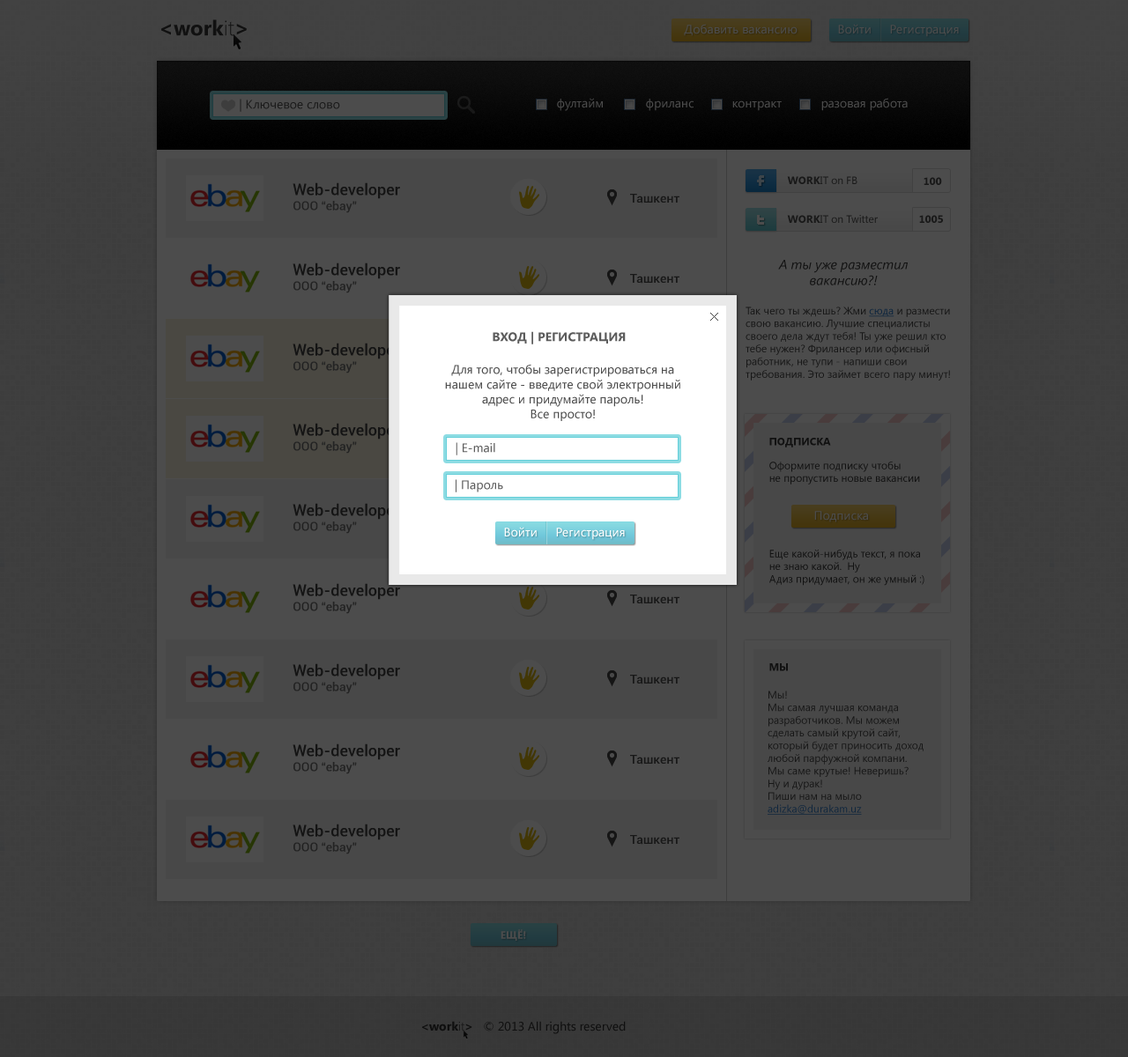
<style>
.page{position:relative;width:1128px;height:1057px}
.page>*{position:absolute;margin:0}
.t1{font:21.1px "SegoeUI-Bold";color:#111111}
.t2{font:21.1px "SegoeUI-Light";color:#111111}
.t3{font:12.3px "SegoeUI";color:#4c4c4c}
.t4{font:12.3px "SegoeUI";color:#1b1b1b}
.t5{font:12.3px "SegoeUI";color:#4b4b4b}
.t6{font:15.9px "Roboto-Medium";color:#141414}
.t7{font:12.3px "Roboto-Medium";color:#141414}
.t8{font:10.6px "SegoeUI";color:#191919}
.t9{font:10.6px "SegoeUI-Bold";color:#191919}
.t10{font:12.3px "Roboto-Medium";color:#181818}
.t11{font:13.2px "SegoeUI-Italic";color:#121212}
.t12{font:10.6px "SegoeUI";color:#171717}
.t13{font:10.6px "SegoeUI";color:#171717;text-decoration:underline}
.t14{font:12.3px "SegoeUI-Bold";color:#5c5c5c}
.t15{font:12.3px "SegoeUI";color:#4d4d4d}
.t16{font:10.6px "SegoeUI-Bold";color:#111111}
.t17{font:12.3px "SegoeUI";color:#5c5c5c}
.t18{font:10.6px "SegoeUI";color:#111111}
.t19{font:12.3px "SegoeUI";color:#ffffff}
.t20{font:10.6px "SegoeUI-Bold";color:#4c4c4c}
.t21{font:12.3px "SegoeUI";color:#0f0f0f}
.t22{font:12.3px "SegoeUI-Bold";color:#0f0f0f}
.t23{font:12.3px "SegoeUI-Light";color:#0f0f0f}
</style>
<div class="page">
<p class="t1" style="left:161px;top:19px;width:86px;height:17px">&lt;work<span class="t2">it</span>&gt;</p>
<p class="t3" style="left:684px;top:24px;width:113px;height:12px">Добавить вакансию</p>
<p class="t3" style="left:838px;top:24px;width:33px;height:10px">Войти</p>
<p class="t3" style="left:890px;top:25px;width:69px;height:12px">Регистрация</p>
<p class="t4" style="left:240px;top:99px;width:100px;height:13px">| Ключевое слово</p>
<p class="t5" style="left:557px;top:98px;width:46px;height:13px">фултайм</p>
<p class="t5" style="left:646px;top:99px;width:47px;height:12px">фриланс</p>
<p class="t5" style="left:732px;top:100px;width:50px;height:11px">контракт</p>
<p class="t5" style="left:821px;top:98px;width:87px;height:13px">разовая работа</p>
<p class="t6" style="left:293px;top:182px;width:107px;height:31px">Web-developer<br><span class="t7">OOO “ebay”</span></p>
<p class="t8" style="left:787px;top:176px;width:70px;height:8px"><span class="t9">WORK</span>IT on FB</p>
<p class="t9" style="left:923px;top:177px;width:19px;height:8px">100</p>
<p class="t10" style="left:630px;top:194px;width:49px;height:10px">Ташкент</p>
<p class="t8" style="left:787px;top:215px;width:91px;height:8px"><span class="t9">WORK</span>IT on Twitter</p>
<p class="t9" style="left:919px;top:215px;width:24px;height:8px">1005</p>
<p class="t6" style="left:293px;top:263px;width:107px;height:30px">Web-developer<br><span class="t7">OOO “ebay”</span></p>
<p class="t11" style="left:778px;top:260px;width:130px;height:25px;text-align:center">А ты уже разместил<br>вакансию?!</p>
<p class="t10" style="left:630px;top:274px;width:49px;height:10px">Ташкент</p>
<p class="t12" style="left:745px;top:307px;width:205px;height:74px">Так чего ты ждешь? Жми <span class="t13">сюда</span> и размести свою вакансию. Лучшие специалисты своего дела ждут тебя! Ты уже решил кто тебе нужен? Фрилансер или офисный работник, не тупи - напиши свои требования. Это займет всего пару минут!</p>
<p class="t14" style="left:493px;top:331px;width:133px;height:14px">ВХОД | РЕГИСТРАЦИЯ</p>
<p class="t6" style="left:293px;top:343px;width:107px;height:31px">Web-developer<br><span class="t7">OOO “ebay”</span></p>
<p class="t15" style="left:445px;top:364px;width:235px;height:57px;text-align:center">Для того, чтобы зарегистрироваться на нашем сайте - введите свой электронный адрес и придумайте пароль! <br>Все просто!</p>
<p class="t6" style="left:293px;top:423px;width:107px;height:31px">Web-developer<br><span class="t7">OOO “ebay”</span></p>
<p class="t16" style="left:769px;top:438px;width:62px;height:10px">ПОДПИСКА</p>
<p class="t17" style="left:456px;top:442px;width:39px;height:14px">| E-mail</p>
<p class="t18" style="left:769px;top:461px;width:151px;height:24px">Оформите подписку чтобы <br>не пропустить новые вакансии</p>
<p class="t17" style="left:456px;top:479px;width:47px;height:14px">| Пароль</p>
<p class="t3" style="left:814px;top:511px;width:54px;height:11px">Подписка</p>
<p class="t19" style="left:504px;top:527px;width:33px;height:10px">Войти</p>
<p class="t19" style="left:556px;top:528px;width:69px;height:12px">Регистрация</p>
<p class="t18" style="left:769px;top:549px;width:155px;height:37px">Еще какой-нибудь текст, я пока<br>не знаю какой.  Ну <br>Адиз придумает, он же умный :)</p>
<p class="t6" style="left:293px;top:583px;width:107px;height:31px">Web-developer<br><span class="t7">OOO “ebay”</span></p>
<p class="t10" style="left:630px;top:595px;width:49px;height:9px">Ташкент</p>
<p class="t6" style="left:293px;top:663px;width:107px;height:31px">Web-developer<br><span class="t7">OOO “ebay”</span></p>
<p class="t16" style="left:769px;top:663px;width:19px;height:8px">МЫ</p>
<p class="t10" style="left:630px;top:675px;width:49px;height:10px">Ташкент</p>
<p class="t12" style="left:767px;top:691px;width:156px;height:124px">Мы!<br>Мы самая лучшая команда<br>разработчиков. Мы можем сделать самый крутой сайт, который будет приносить доход любой парфужной компани.<br>Мы саме крутые! Неверишь?<br>Ну и дурак!<br>Пиши нам на мыло<br><span class="t13">adizka@durakam.uz</span></p>
<p class="t6" style="left:293px;top:744px;width:107px;height:30px">Web-developer<br><span class="t7">OOO “ebay”</span></p>
<p class="t10" style="left:630px;top:755px;width:49px;height:10px">Ташкент</p>
<p class="t6" style="left:293px;top:824px;width:107px;height:31px">Web-developer<br><span class="t7">OOO “ebay”</span></p>
<p class="t10" style="left:630px;top:835px;width:49px;height:10px">Ташкент</p>
<p class="t20" style="left:500px;top:930px;width:26px;height:11px">ЕЩЁ!</p>
<p class="t21" style="left:422px;top:1021px;width:204px;height:13px"><span class="t22">&lt;work</span><span class="t23">it</span><span class="t22">&gt;   </span>© 2013 All rights reserved</p>
</div>
